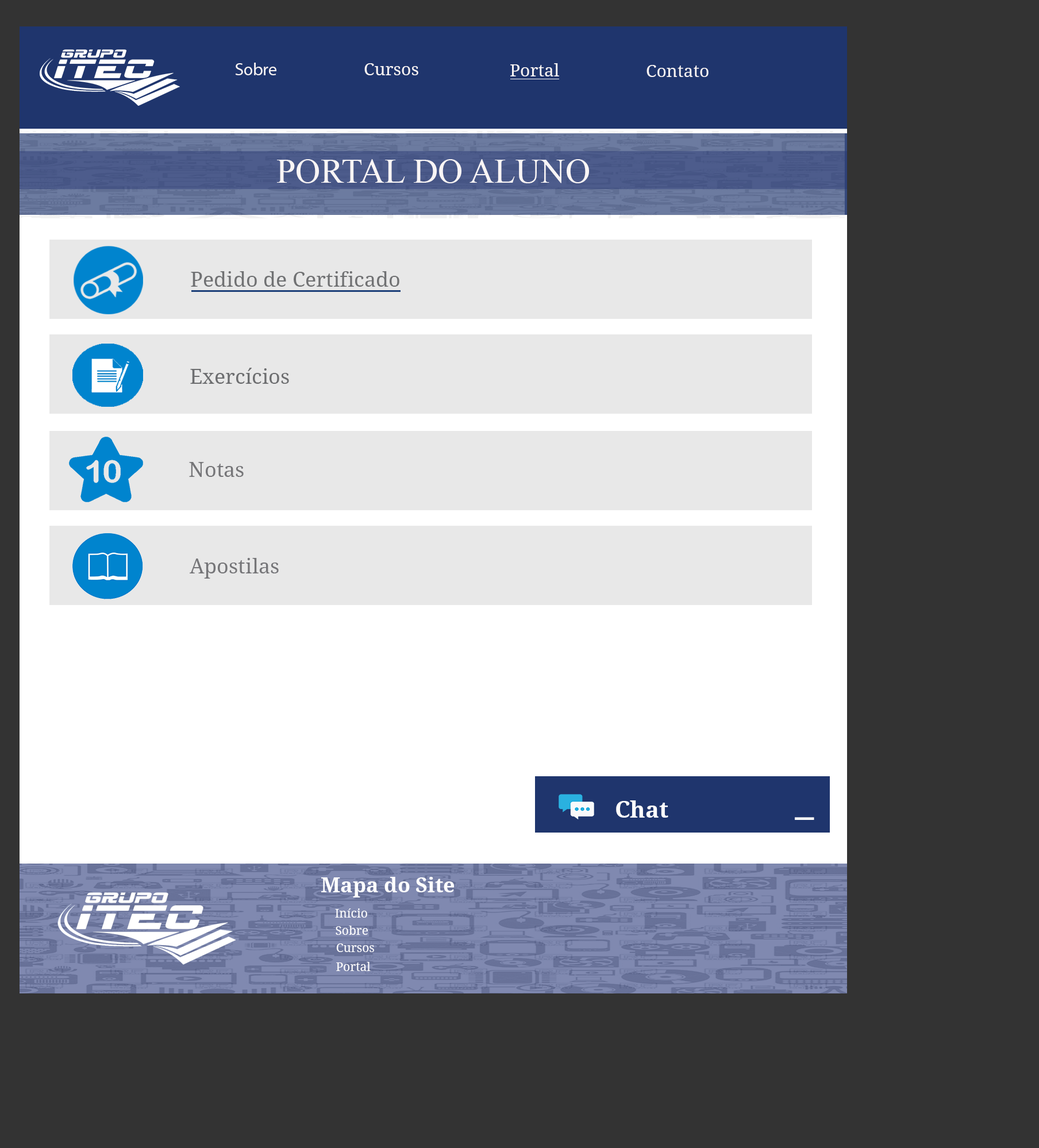
<style>
.page{position:relative;width:1039px;height:1148px;background:#333333}
.page>*{position:absolute;margin:0}
.t1{font:17.2px "MyriadPro-Regular";color:#f9f5f5}
.t2{font:17.2px "DroidSerif";color:#f9f5f5}
.t3{font:34.5px "TimesNewRomanPSMT";color:#f9f5f5}
.t4{font:20.7px "DroidSerif";color:#707173}
.t5{font:20.7px "DroidSerif";color:#6d6e70}
.t6{font:20.7px "DroidSerif";color:#757578}
.t7{font:23px "DroidSerif-Bold";color:#fdfdfd}
.t8{font:41.4px "DroidSerif-Bold";color:#fdfdfd}
.t9{font:20.7px "DroidSerif-Bold";color:#fdfdfe}
.t10{font:12.1px "DroidSerif";color:#fdfdfe}
</style>
<div class="page">
<p class="t1" style="left:235px;top:63px;width:41px;height:12px">Sobre</p>
<p class="t2" style="left:364px;top:63px;width:54px;height:12px">Cursos</p>
<p class="t2" style="left:510px;top:63px;width:49px;height:13px">Portal</p>
<p class="t2" style="left:646px;top:65px;width:62px;height:12px">Contato</p>
<p class="t3" style="left:277px;top:159px;width:312px;height:24px">PORTAL DO ALUNO</p>
<p class="t4" style="left:191px;top:271px;width:208px;height:16px">Pedido de Certificado</p>
<p class="t5" style="left:190px;top:368px;width:99px;height:16px">Exercícios</p>
<p class="t6" style="left:189px;top:462px;width:55px;height:15px">Notas</p>
<p class="t6" style="left:190px;top:558px;width:89px;height:21px">Apostilas</p>
<p class="t7" style="left:616px;top:800px;width:52px;height:18px">Chat</p>
<p class="t8" style="left:795px;top:817px;width:19px;height:3px">_</p>
<p class="t9" style="left:321px;top:877px;width:133px;height:20px">Mapa do Site</p>
<p class="t10" style="left:335px;top:908px;width:32px;height:10px">Início</p>
<p class="t10" style="left:336px;top:926px;width:32px;height:9px">Sobre</p>
<p class="t10" style="left:336px;top:943px;width:38px;height:9px">Cursos</p>
<p class="t10" style="left:336px;top:962px;width:35px;height:9px">Portal</p>
</div>
